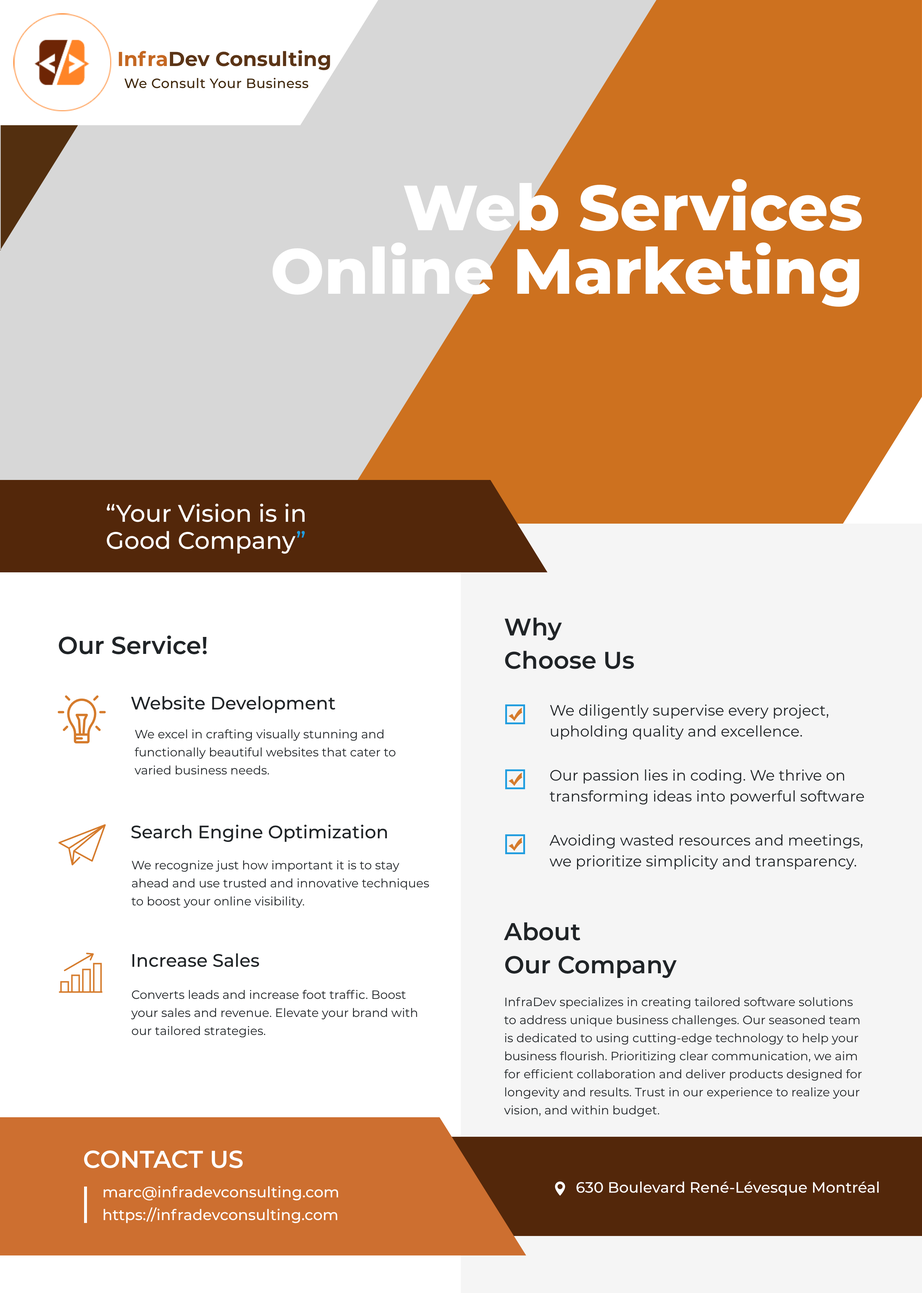
<style>
.page{position:relative;width:922px;height:1293px;background:#ffffff}
.page>*{position:absolute;margin:0}
.t1{font:20.2px "Montserrat-Bold";color:#5b3416}
.t2{font:20.2px "Montserrat-Bold";color:#c46722}
.t3{font:13.5px "Montserrat-Medium";letter-spacing:0.02em;color:#40290e}
.t4{font:63.7px/63.7px "Montserrat-ExtraBold";color:#ffffff}
.t5{font:24.1px/27.1px "Montserrat-Medium";color:#ffffff}
.t6{font:24.1px/27.1px "Montserrat-Medium";color:#219ee0}
.t7{font:24.1px/33.1px "Montserrat-SemiBold";color:#202427}
.t8{font:24.1px "Montserrat-SemiBold";color:#202427}
.t9{font:18px "Montserrat-Medium";color:#202427}
.t10{font:15px/21.1px "Montserrat-Regular";color:#202427}
.t11{font:12px/18px "Montserrat-Regular";color:#202427}
.t12{font:24.1px "Montserrat-SemiBold";color:#ffffff;text-transform:uppercase}
.t13{font:15px "Montserrat-Medium";color:#ffffff}
</style>
<div class="page">
<p class="t1" style="left:119px;top:50px;width:211px;height:20px"><span class="t2">Infra</span>Dev Consulting</p>
<p class="t3" style="left:124px;top:78px;width:185px;height:10px">We Consult Your Business</p>
<p class="t4" style="left:272px;top:179px;width:590px;height:128px;text-align:right">Web Services<br>Online Marketing</p>
<p class="t5" style="left:106px;top:503px;width:199px;height:51px">“Your Vision is in <br>Good Company<span class="t6">”</span></p>
<p class="t7" style="left:505px;top:618px;width:129px;height:51px">Why<br>Choose Us</p>
<p class="t8" style="left:59px;top:636px;width:148px;height:18px">Our Service!</p>
<p class="t9" style="left:131px;top:696px;width:204px;height:17px">Website Development</p>
<p class="t10" style="left:550px;top:704px;width:279px;height:36px">We diligently supervise every project,<br>upholding quality and excellence.</p>
<p class="t11" style="left:135px;top:729px;width:261px;height:46px">We excel in crafting visually stunning and functionally beautiful websites that cater to varied business needs.</p>
<p class="t10" style="left:550px;top:769px;width:314px;height:36px">Our passion lies in coding. We thrive on <br>transforming ideas into powerful software</p>
<p class="t9" style="left:131px;top:825px;width:256px;height:17px">Search Engine Optimization</p>
<p class="t10" style="left:549px;top:834px;width:314px;height:36px">Avoiding wasted resources and meetings, <br>we prioritize simplicity and transparency.</p>
<p class="t11" style="left:131px;top:860px;width:298px;height:48px">We recognize just how important it is to stay ahead and use trusted and innovative techniques to boost your online visibility.</p>
<p class="t7" style="left:504px;top:922px;width:173px;height:56px">About<br>Our Company</p>
<p class="t9" style="left:132px;top:953px;width:127px;height:14px">Increase Sales</p>
<p class="t11" style="left:131px;top:990px;width:286px;height:48px">Converts leads and increase foot traffic. Boost your sales and revenue. Elevate your brand with our tailored strategies.</p>
<p class="t11" style="left:504px;top:997px;width:358px;height:120px">InfraDev specializes in creating tailored software solutions to address unique business challenges. Our seasoned team is dedicated to using cutting-edge technology to help your business flourish. Prioritizing clear communication, we aim for efficient collaboration and deliver products designed for longevity and results. Trust in our experience to realize your vision, and within budget.</p>
<p class="t12" style="left:84px;top:1151px;width:159px;height:17px">Contact US</p>
<p class="t13" style="left:576px;top:1182px;width:303px;height:14px">630 Boulevard René-Lévesque Montréal</p>
<p class="t13" style="left:104px;top:1186px;width:234px;height:15px">marc@infradevconsulting.com</p>
<p class="t13" style="left:104px;top:1207px;width:233px;height:16px">https://infradevconsulting.com</p>
</div>
